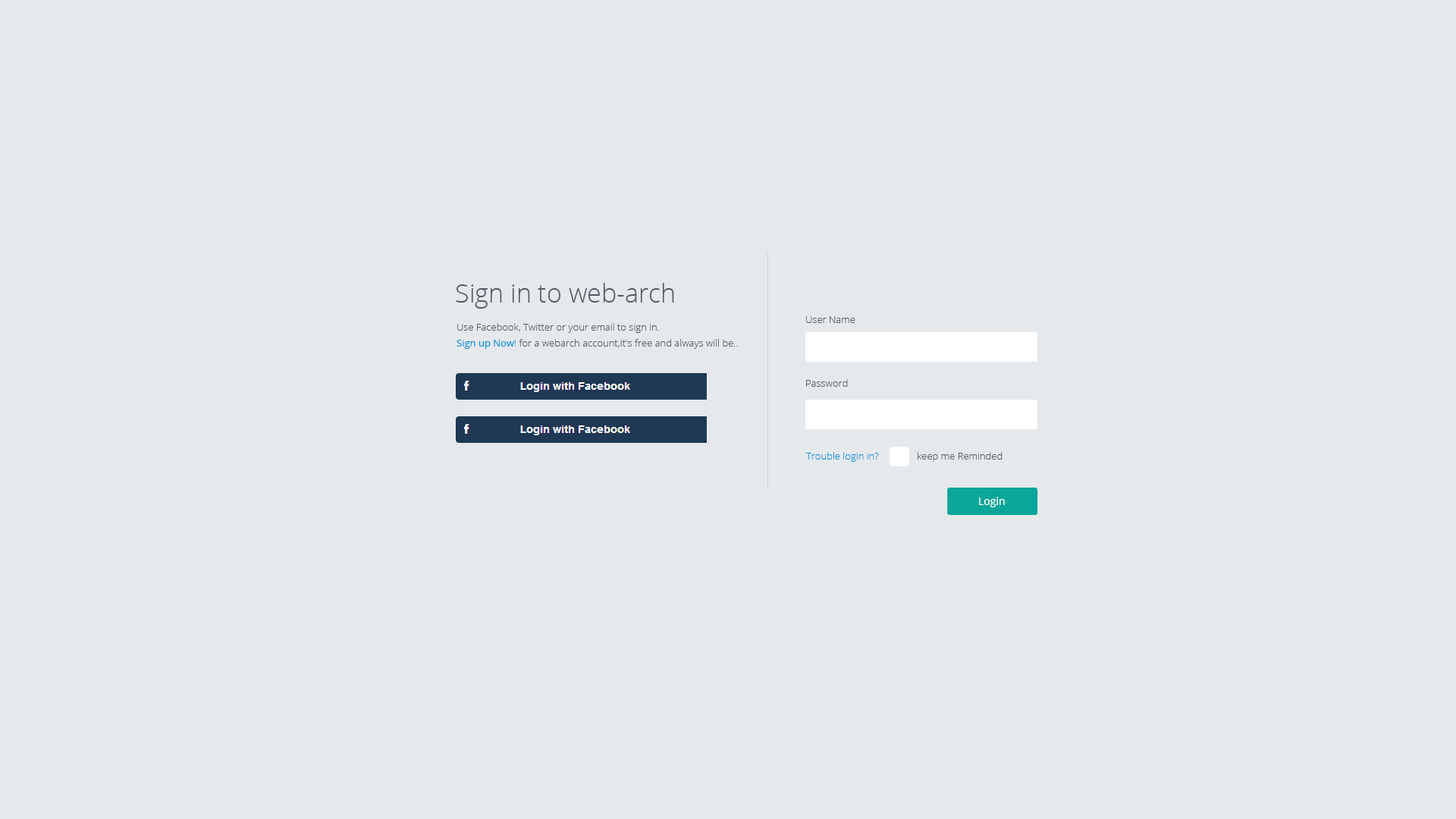
<style>
.page{position:relative;width:1456px;height:819px;background:#e5e9ec}
.page>*{position:absolute;margin:0}
.t1{font:25.8px "OpenSans-Light";color:#525965}
.t2{font:9.9px "OpenSans-Light";color:#525965}
.t3{font:9.9px/16.1px "OpenSans-Light";color:#525965}
.t4{font:9.9px/16.1px "OpenSans";color:#0090d9}
.t5{font:9.9px/16.1px "OpenSans-Light";color:#0090d9}
.t6{font:9.9px "OpenSans-Light";color:#0090d9}
.t7{font:10.6px "OpenSans";color:#ffffff}
</style>
<div class="page">
<p class="t1" style="left:456px;top:283px;width:218px;height:26px">Sign in to web-arch</p>
<p class="t2" style="left:806px;top:316px;width:49px;height:7px">User Name</p>
<p class="t3" style="left:457px;top:323px;width:281px;height:26px">Use Facebook, Twitter or your email to sign in.<br><span class="t4">Sign up Now</span><span class="t5">! </span>for a webarch account,It's free and always will be..</p>
<p class="t2" style="left:806px;top:379px;width:42px;height:8px">Password</p>
<p class="t6" style="left:805px;top:452px;width:74px;height:10px">Trouble login in?</p>
<p class="t2" style="left:918px;top:452px;width:85px;height:10px">keep me Reminded</p>
<p class="t7" style="left:979px;top:497px;width:26px;height:10px">Login</p>
</div>
